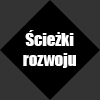
<style>
.page{position:relative;width:100px;height:100px;background:#333333}
.page>*{position:absolute;margin:0}
.t1{font:16.7px "Impact";color:#ffffff}
</style>
<div class="page">
<p class="t1" style="left:23px;top:30px;width:53px;height:38px;text-align:center">Ścieżki<br>rozwoju</p>
</div>
